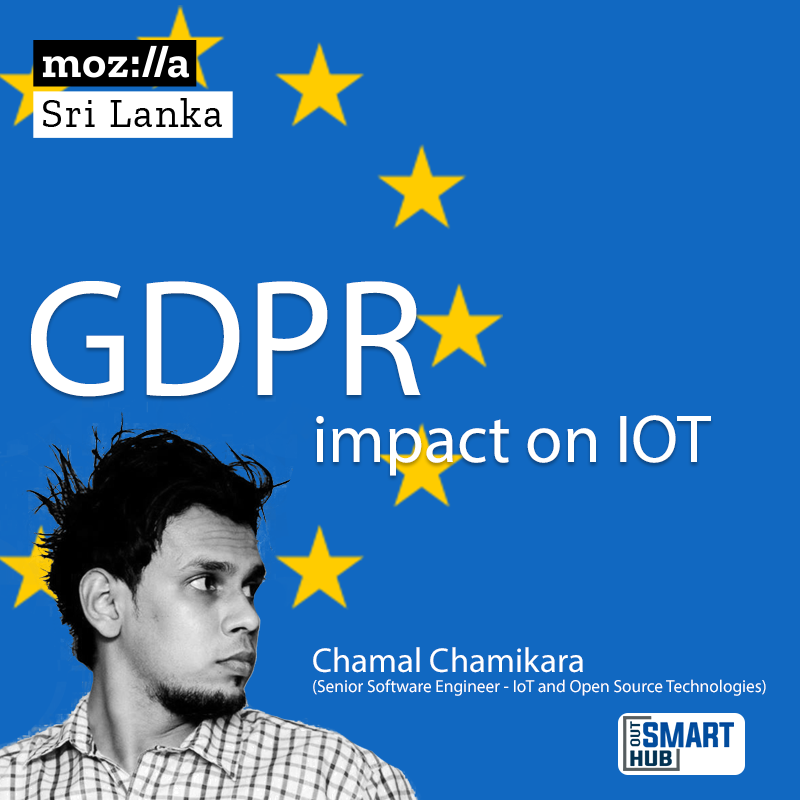
<style>
.page{position:relative;width:800px;height:800px;background:#1168c1}
.page>*{position:absolute;margin:0}
.t1{font:167.4px "MyriadPro-Regular";color:#ffffff}
.t2{font:68.3px "MyriadPro-Regular";color:#ffffff}
.t3{font:17.4px "MyriadPro-Regular";color:#ffffff}
.t4{font:34.8px "MyriadPro-Regular";color:#ffffff}
</style>
<div class="page">
<p class="t1" style="left:31px;top:281px;width:390px;height:116px">GDPR</p>
<p class="t2" style="left:316px;top:415px;width:395px;height:61px">impact on IOT</p>
<p class="t3" style="left:313px;top:647px;width:453px;height:49px"><span class="t4">Chamal Chamikara <br></span>(Senior Software Engineer - IoT and Open Source Technologies)</p>
</div>
